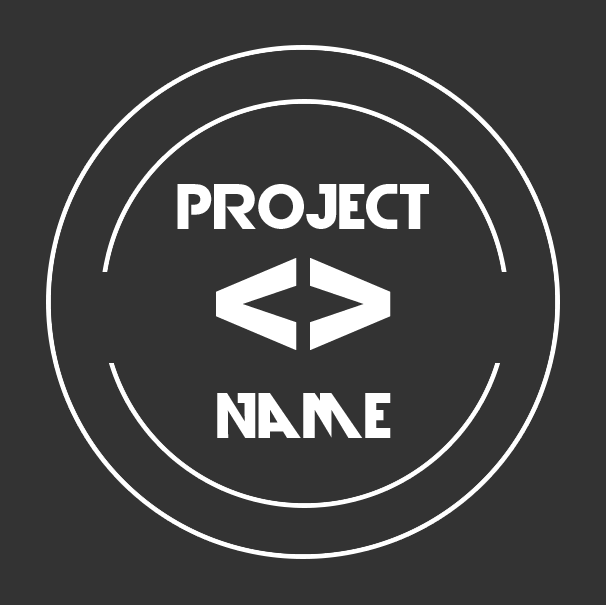
<style>
.page{position:relative;width:606px;height:605px;background:#333333}
.page>*{position:absolute;margin:0}
.t1{font:60px "DevilBreezeBold";color:#ffffff}
.t2{font:157.9px "DevilBreezeBold";color:#ffffff}
</style>
<div class="page">
<p class="t1" style="left:177px;top:184px;width:252px;height:45px">Project</p>
<p class="t2" style="left:216px;top:258px;width:175px;height:92px">&lt;&gt;</p>
<p class="t1" style="left:217px;top:393px;width:174px;height:45px">Name</p>
</div>
